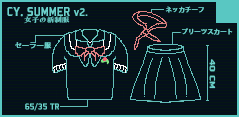
<style>
.page{position:relative;width:239px;height:117px;background:#050f1c}
.page>*{position:absolute;margin:0}
.t1{font:6.5px "AdobeHeitiStd-Regular";color:#6cd1cb}
.t2{font:14.1px "Bombardier";color:#6cd1cb}
.t3{font:14.1px "AdobeHeitiStd-Regular";color:#6cd1cb}
.t4{font:12px "Bombardier";color:#6cd1cb}
.t5{font:6.7px "FZFENGRSTS-EB--GB1-0";color:#6cd1cb;scale:1.13 1}
.t6{font:7.3px "AdobeHeitiStd-Regular";color:#6cd1cb}
.t7{font:8.3px "Bombardier";color:#6cd1cb;scale:1.65 1}
.t8{font:9.2px "Bombardier";color:#6cd1cb;scale:1.08 1}
</style>
<div class="page">
<p class="t1" style="left:165px;top:6px;width:39px;height:7px">ネッカチーフ</p>
<p class="t2" style="left:7px;top:7px;width:81px;height:10px">CY<span class="t3">. </span>SUMMER <span class="t4">v2.</span></p>
<p class="t5" style="left:24px;top:16px;width:46px;height:8px">女子の新制服</p>
<p class="t1" style="left:182px;top:28px;width:51px;height:7px">プリーツスカート</p>
<p class="t6" style="left:15px;top:42px;width:37px;height:7px">セーラー服</p>
<p class="t7" style="left:209px;top:59px;width:7px;height:30px;rotate:90deg">40 CM</p>
<p class="t8" style="left:25px;top:103px;width:34px;height:8px">65/35 TR</p>
</div>
